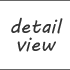
<style>
.page{position:relative;width:70px;height:70px;background:#ffffff}
.page>*{position:absolute;margin:0}
.t1{font:20px/18px "MVBoli";color:#333333}
</style>
<div class="page">
<p class="t1" style="left:11px;top:17px;width:52px;height:35px;text-align:center">detail<br>view</p>
</div>
